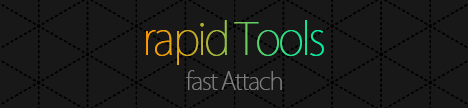
<style>
.page{position:relative;width:468px;height:108px;background:#181818}
.page>*{position:absolute;margin:0}
.t1{font:44.1px "KozGoPr6N-ExtraLight";letter-spacing:-0.06em}
.t2{font:24.1px "KozGoPr6N-ExtraLight";letter-spacing:-0.06em;color:#7f7f7f}
</style>
<div class="page">
<p class="t1" style="left:146px;top:20px;width:178px;height:45px">rapid Tools</p>
<p class="t2" style="left:186px;top:70px;width:96px;height:20px">fast Attach</p>
</div>
